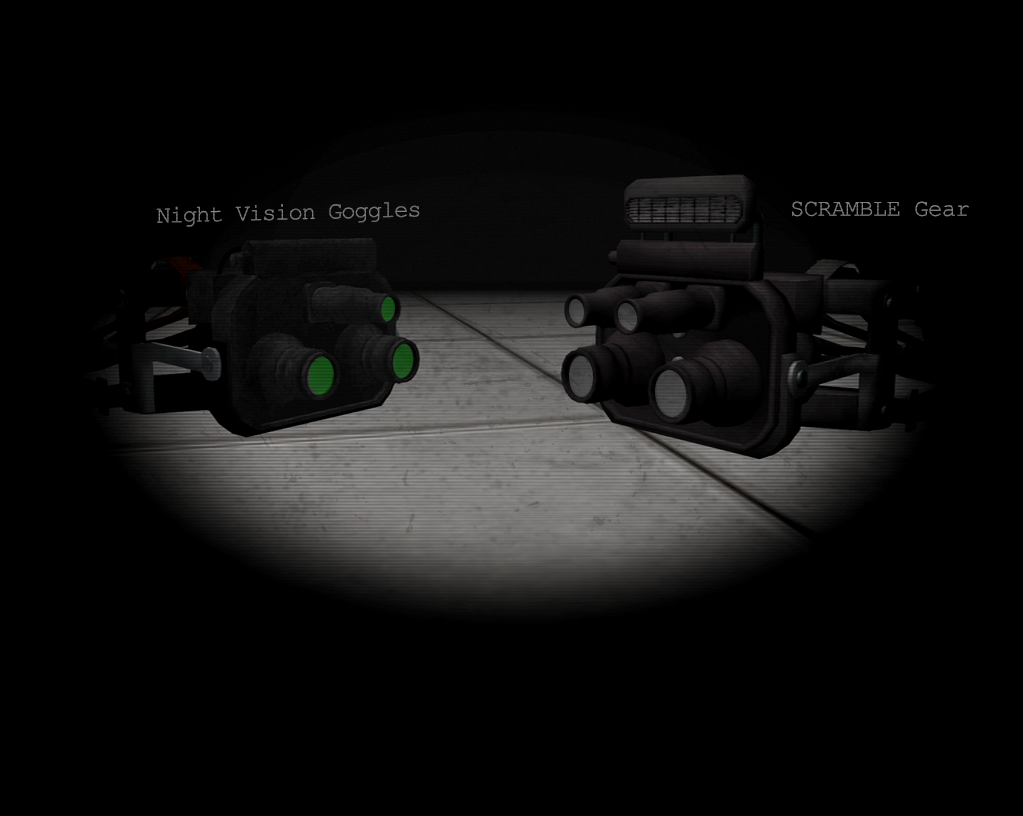
<style>
.page{position:relative;width:1023px;height:816px;background:#000000}
.page>*{position:absolute;margin:0}
.t1{font:24px "CourierNewPSMT";letter-spacing:-0.05em;color:#717071}
.t2{font:24px "CourierNewPSMT";letter-spacing:-0.025em;color:#898788;text-transform:uppercase}
.t3{font:24px "CourierNewPSMT";letter-spacing:-0.025em;color:#898788}
</style>
<div class="page">
<p class="t1" style="left:156px;top:202px;width:264px;height:25px;rotate:-1deg">Night Vision Goggles</p>
<p class="t2" style="left:792px;top:201px;width:177px;height:16px">Scramble<span class="t3"> Gear</span></p>
</div>
